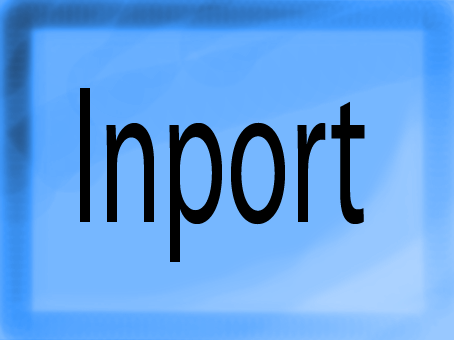
<style>
.page{position:relative;width:454px;height:340px;background:#76b7ff}
.page>*{position:absolute;margin:0}
.t1{font:199.5px "MyriadPro-Regular";color:#000000;scale:0.57 1}
</style>
<div class="page">
<p class="t1" style="left:80px;top:88px;width:285px;height:174px">Inport</p>
</div>
